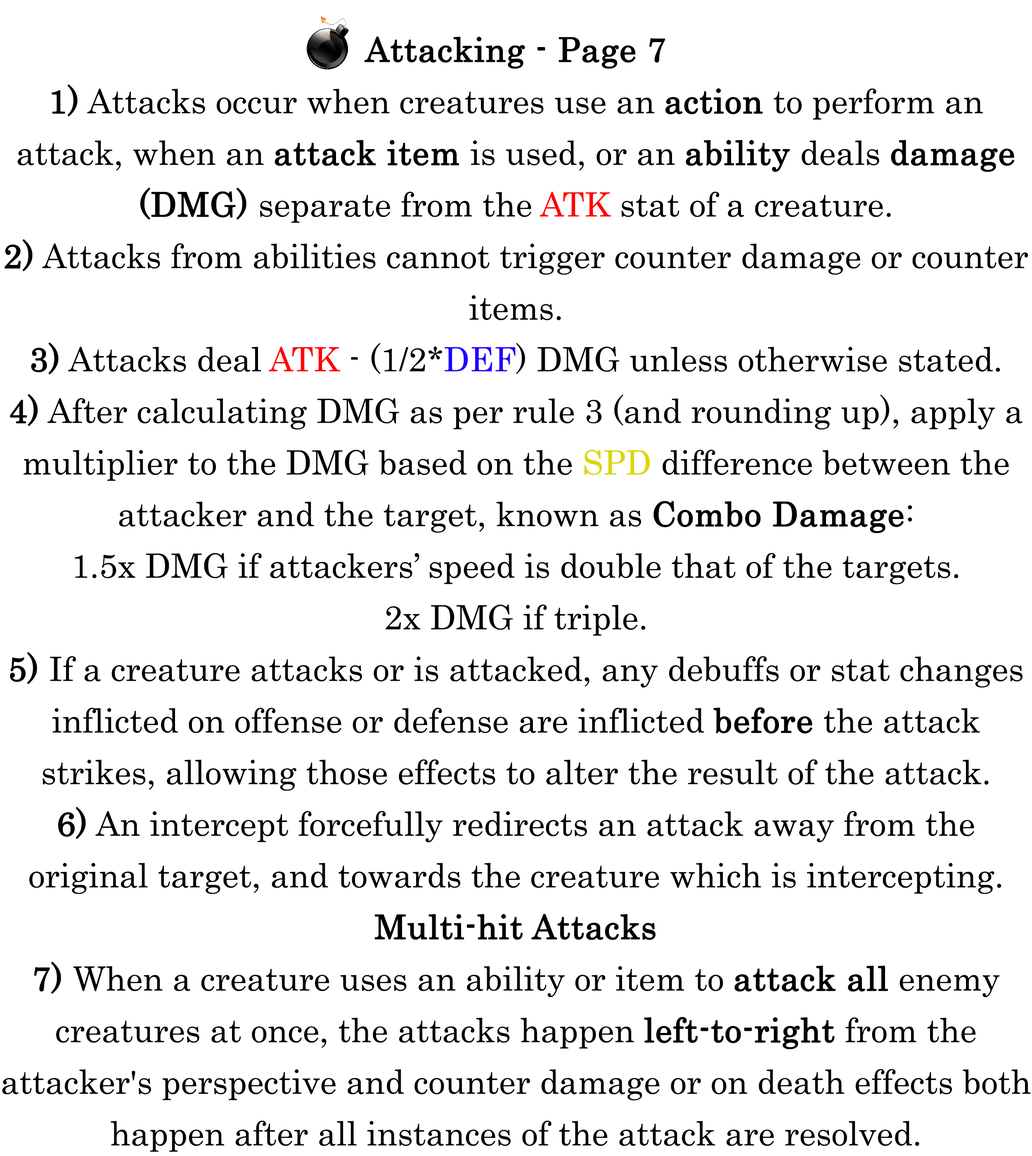
<style>
.page{position:relative;width:1032px;height:1156px;background:#ffffff}
.page>*{position:absolute;margin:0}
.t1{font:57.3px/51.6px "Century";color:#000000}
.t2{font:57.3px/51.6px "Century";color:#000000;font-weight:bold}
.t3{font:57.3px/51.6px "Century";color:#ff0000}
.t4{font:57.3px/51.6px "Century";color:#1e00ff}
.t5{font:57.3px/51.6px "Century";color:#d9d600}
</style>
<div class="page">
<p class="t1" style="left:2px;top:36px;width:1029px;height:1116px;text-align:center"><span class="t2">Attacking - Page 7<br>1)</span> Attacks occur when creatures use an <span class="t2">action</span> to perform an attack, when an <span class="t2">attack item</span> is used, or an <span class="t2">ability</span> deals <span class="t2">damage (DMG)</span> separate from the <span class="t3">ATK </span>stat of a creature.<br><span class="t2">2)</span> Attacks from abilities cannot trigger counter damage or counter items.<br><span class="t2">3)</span> Attacks deal <span class="t3">ATK </span>- (1/2*<span class="t4">DEF</span>) DMG unless otherwise stated.<br><span class="t2">4)</span> After calculating DMG as per rule 3 (and rounding up), apply a multiplier to the DMG based on the <span class="t5">SPD</span> difference between the attacker and the target, known as <span class="t2">Combo Damage</span>:<br>1.5x DMG if attackers’ speed is double that of the targets.<br>2x DMG if triple.<br><span class="t2">5)</span> If a creature attacks or is attacked, any debuffs or stat changes inflicted on offense or defense are inflicted <span class="t2">before</span> the attack strikes, allowing those effects to alter the result of the attack.<br><span class="t2">6)</span> An intercept forcefully redirects an attack away from the original target, and towards the creature which is intercepting.<br><span class="t2">Multi-hit Attacks<br>7)</span> When a creature uses an ability or item to <span class="t2">attack all</span> enemy creatures at once, the attacks happen <span class="t2">left-to-right</span> from the attacker's perspective and counter damage or on death effects both happen after all instances of the attack are resolved.</p>
</div>
